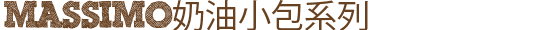
<style>
.page{position:relative;width:549px;height:30px;background:#ffffff}
.page>*{position:absolute;margin:0}
.t1{font:36px "ScribbleBoxDEMO";color:#684121}
.t2{font:33px "KozGoPr6N-Regular";color:#684121}
</style>
<div class="page">
<p class="t1" style="left:4px;top:0px;width:364px;height:32px">Massimo<span class="t2">奶油小包系列</span></p>
</div>
